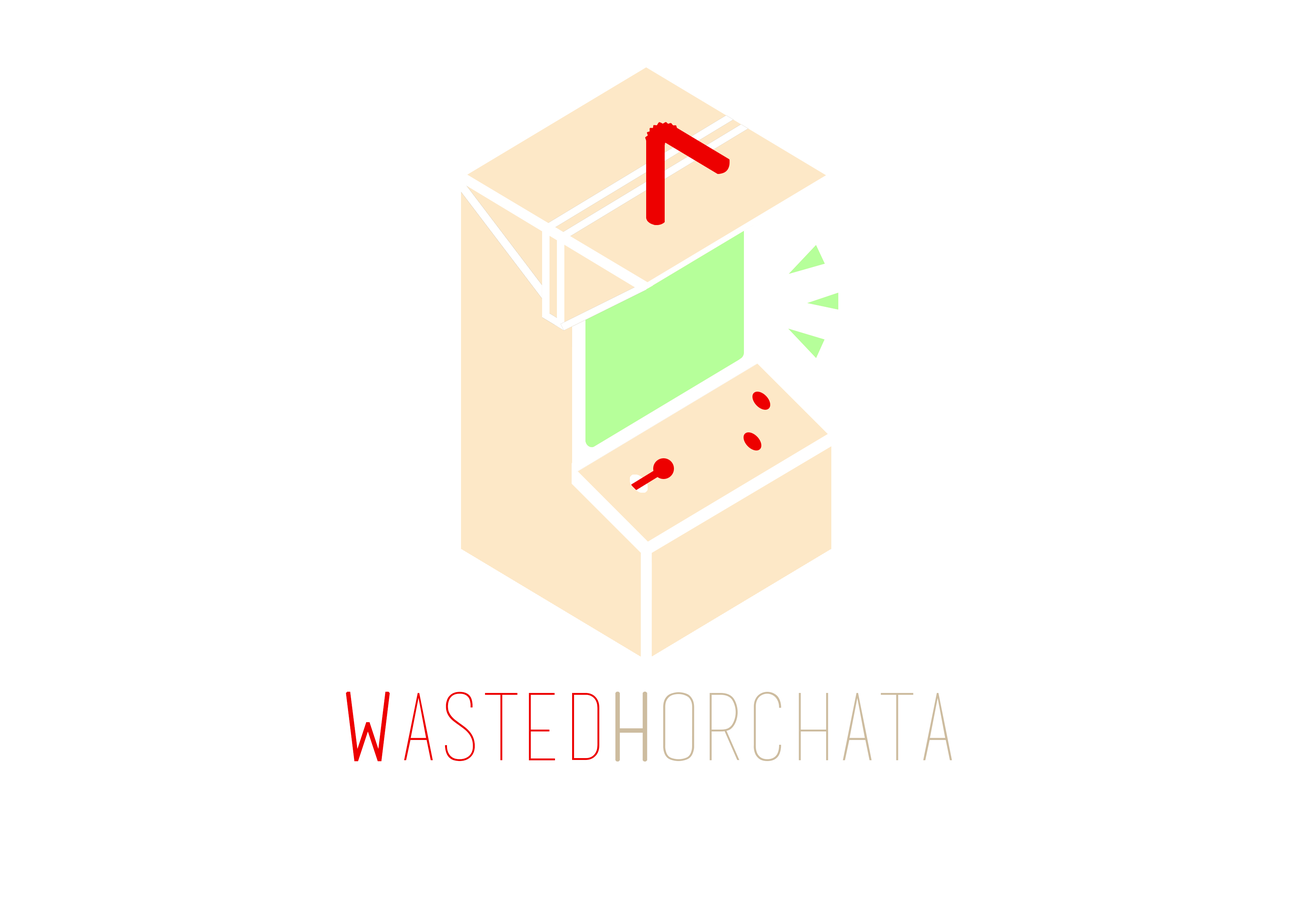
<style>
.page{position:relative;width:1299px;height:918px;background:#ffffff}
.page>*{position:absolute;margin:0}
.t1{font:92.6px "basictitlefont";color:#cdbc9f}
.t2{font:92.6px "basictitlefont";color:#ed0000;font-weight:bold}
.t3{font:92.6px "basictitlefont";color:#ed0000}
.t4{font:92.6px "basictitlefont";color:#cdbc9f;font-weight:bold}
</style>
<div class="page">
<p class="t1" style="left:346px;top:692px;width:606px;height:70px"><span class="t2">W</span><span class="t3">ASTED</span><span class="t4">H</span>ORCHATA</p>
</div>
